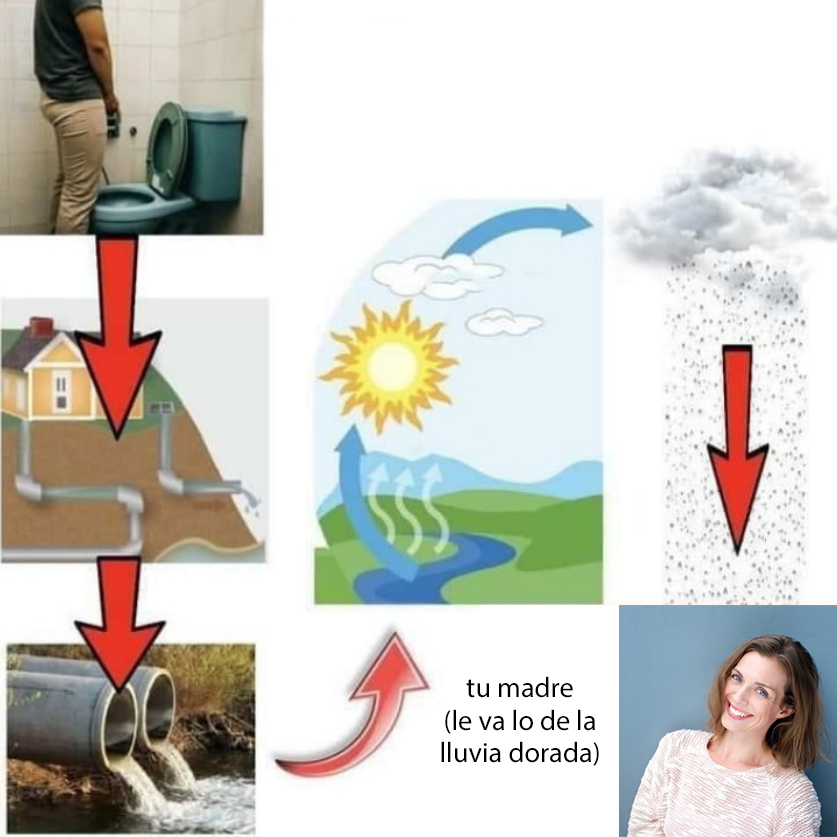
<style>
.page{position:relative;width:837px;height:837px;background:#ffffff}
.page>*{position:absolute;margin:0}
.t1{font:28.4px "MyriadPro-Regular";color:#000000}
</style>
<div class="page">
<p class="t1" style="left:441px;top:676px;width:158px;height:90px;text-align:center">tu madre<br>(le va lo de la<br>lluvia dorada)</p>
</div>
